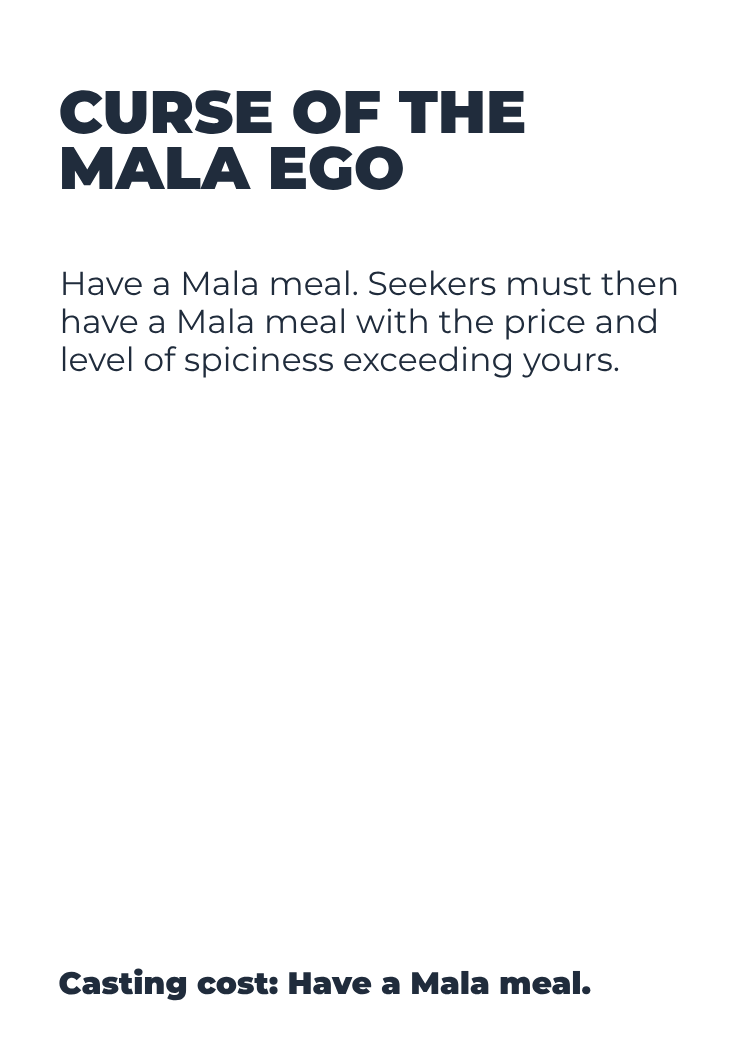
<style>
.page{position:relative;width:750px;height:1050px;background:#ffffff}
.page>*{position:absolute;margin:0}
.t1{font:59.8px/56.4px "Montserrat-Black";color:#202c3c}
.t2{font:33.1px/38px "Montserrat-Regular";color:#202c3c}
.t3{font:31.1px "Montserrat-Black";color:#202c3c}
</style>
<div class="page">
<p class="t1" style="left:60px;top:90px;width:465px;height:100px">CURSE OF THE<br>MALA EGO</p>
<p class="t2" style="left:62px;top:270px;width:615px;height:108px">Have a Mala meal. Seekers must then<br>have a Mala meal with the price and<br>level of spiciness exceeding yours.</p>
<p class="t3" style="left:59px;top:968px;width:532px;height:33px">Casting cost: Have a Mala meal.</p>
</div>
